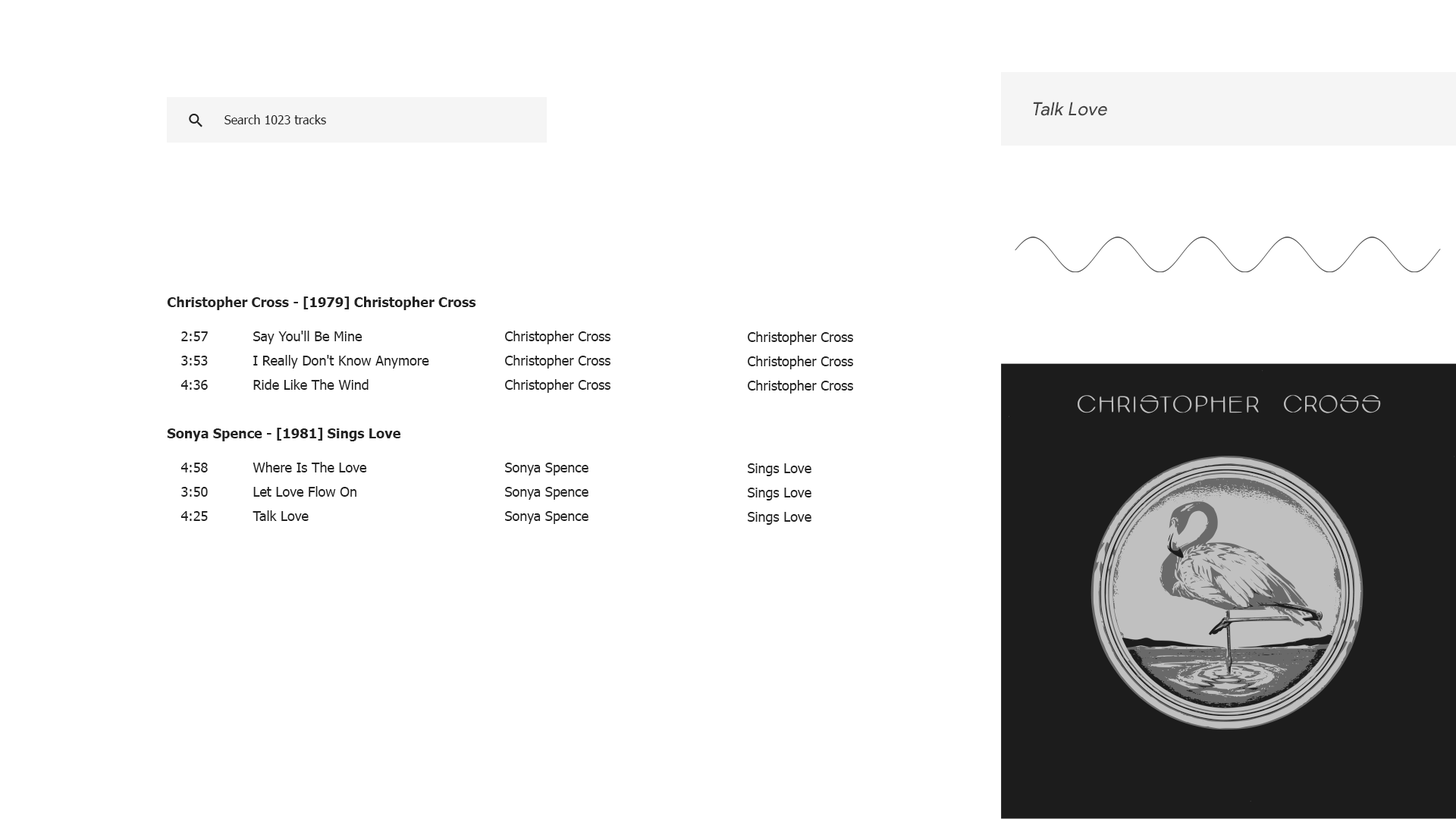
<style>
.page{position:relative;width:1456px;height:819px;background:#ffffff}
.page>*{position:absolute;margin:0}
.t1{font:18.2px "ProductSans-Regular";letter-spacing:0.025em;color:#444444;font-style:italic}
.t2{font:12.1px "Tahoma";color:#222222}
.t3{font:13.6px "Tahoma-Bold";color:#222222}
.t4{font:13.6px "Tahoma";color:#222222}
</style>
<div class="page">
<p class="t1" style="left:1033px;top:102px;width:74px;height:14px">Talk Love</p>
<p class="t2" style="left:224px;top:115px;width:102px;height:9px">Search 1023 tracks</p>
<p class="t3" style="left:167px;top:297px;width:309px;height:13px">Christopher Cross - [1979] Christopher Cross</p>
<p class="t4" style="left:181px;top:331px;width:27px;height:10px">2:57</p>
<p class="t4" style="left:253px;top:331px;width:109px;height:13px">Say You'll Be Mine</p>
<p class="t4" style="left:505px;top:331px;width:105px;height:13px">Christopher Cross</p>
<p class="t4" style="left:748px;top:331px;width:105px;height:14px">Christopher Cross</p>
<p class="t4" style="left:181px;top:356px;width:27px;height:10px">3:53</p>
<p class="t4" style="left:253px;top:355px;width:176px;height:14px">I Really Don't Know Anymore</p>
<p class="t4" style="left:505px;top:355px;width:105px;height:14px">Christopher Cross</p>
<p class="t4" style="left:748px;top:356px;width:105px;height:13px">Christopher Cross</p>
<p class="t4" style="left:180px;top:380px;width:28px;height:10px">4:36</p>
<p class="t4" style="left:253px;top:379px;width:116px;height:11px">Ride Like The Wind</p>
<p class="t4" style="left:505px;top:379px;width:105px;height:14px">Christopher Cross</p>
<p class="t4" style="left:748px;top:380px;width:105px;height:14px">Christopher Cross</p>
<p class="t3" style="left:167px;top:428px;width:233px;height:13px">Sonya Spence - [1981] Sings Love</p>
<p class="t4" style="left:253px;top:462px;width:114px;height:10px">Where Is The Love</p>
<p class="t4" style="left:180px;top:463px;width:28px;height:9px">4:58</p>
<p class="t4" style="left:505px;top:463px;width:83px;height:12px">Sonya Spence</p>
<p class="t4" style="left:748px;top:463px;width:63px;height:13px">Sings Love</p>
<p class="t4" style="left:181px;top:487px;width:27px;height:10px">3:50</p>
<p class="t4" style="left:253px;top:486px;width:103px;height:11px">Let Love Flow On</p>
<p class="t4" style="left:505px;top:487px;width:83px;height:13px">Sonya Spence</p>
<p class="t4" style="left:748px;top:488px;width:63px;height:12px">Sings Love</p>
<p class="t4" style="left:180px;top:511px;width:28px;height:10px">4:25</p>
<p class="t4" style="left:253px;top:510px;width:56px;height:11px">Talk Love</p>
<p class="t4" style="left:505px;top:511px;width:83px;height:13px">Sonya Spence</p>
<p class="t4" style="left:748px;top:512px;width:63px;height:13px">Sings Love</p>
</div>
